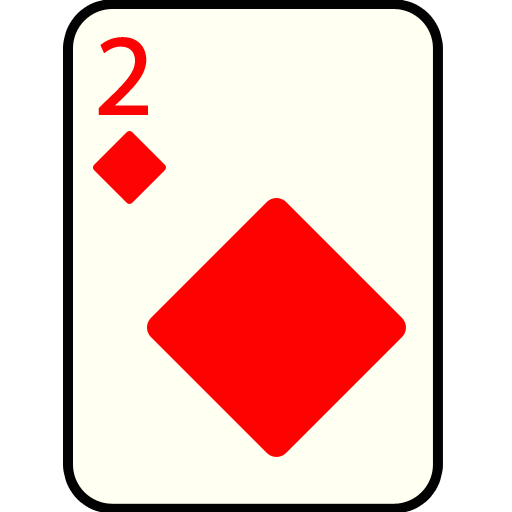
<style>
.page{position:relative;width:512px;height:512px;background:#fffff2}
.page>*{position:absolute;margin:0}
.t1{font:200px "MyriadPro-Regular";letter-spacing:-0.05em;color:#fd0202;font-variant:small-caps;font-weight:bold}
</style>
<div class="page">
<p class="t1" style="left:98px;top:37px;width:50px;height:78px">2</p>
</div>
